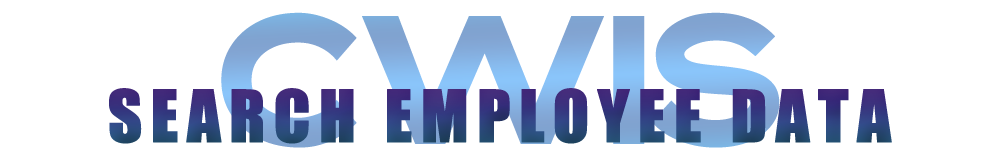
<style>
.page{position:relative;width:1000px;height:160px;background:#ffffff}
.page>*{position:absolute;margin:0}
.t1{font:161.1px "Bristone";letter-spacing:-0.04em}
.t2{font:66.7px "Impact";letter-spacing:0.1em;color:#323b7b;font-weight:bold}
</style>
<div class="page">
<p class="t1" style="left:221px;top:12px;width:559px;height:136px">cwis</p>
<p class="t2" style="left:109px;top:88px;width:783px;height:56px">SEARCH EMPLOYEE DATA</p>
</div>
